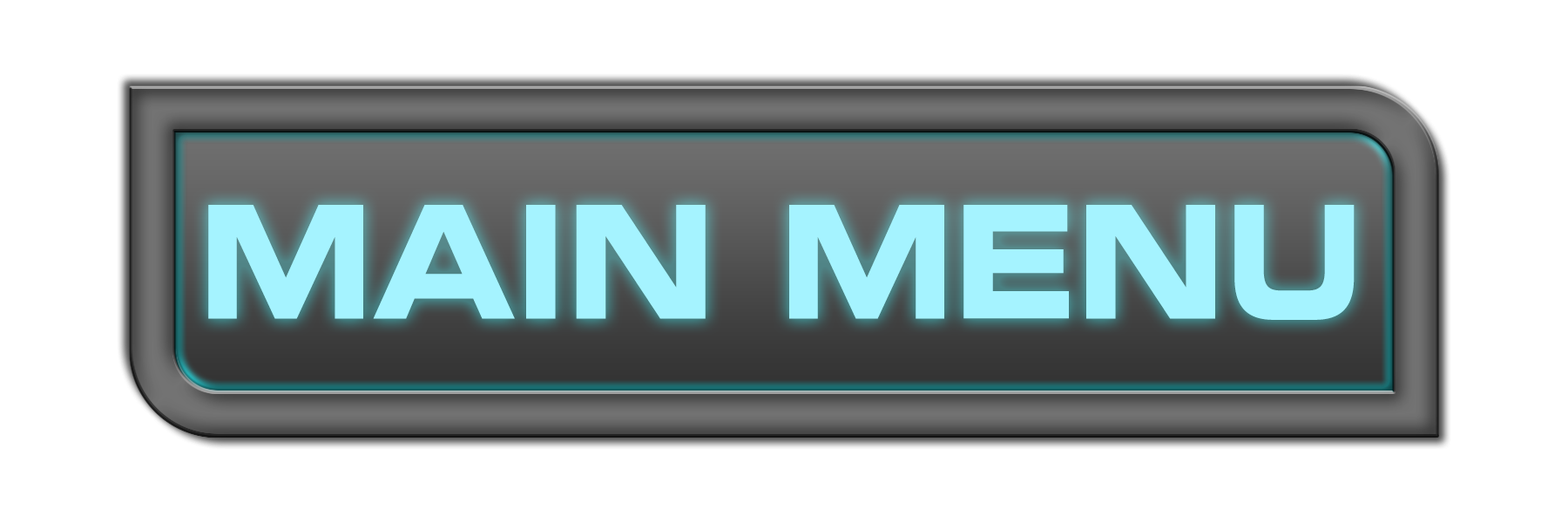
<style>
.page{position:relative;width:1568px;height:523px;background:#ffffff}
.page>*{position:absolute;margin:0}
.t1{font:156.8px "EurostileLTStd-BoldEx2";color:#a5f3ff;scale:0.83 1}
</style>
<div class="page">
<p class="t1" style="left:208px;top:205px;width:1147px;height:115px">MAIN MENU</p>
</div>
